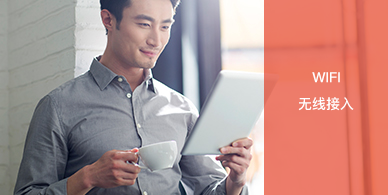
<style>
.page{position:relative;width:388px;height:195px}
.page>*{position:absolute;margin:0}
.t1{font:14px "PingFangSC-Medium";color:#fefefe}
</style>
<div class="page">
<p class="t1" style="left:312px;top:72px;width:28px;height:11px">WIFI</p>
<p class="t1" style="left:298px;top:97px;width:56px;height:14px">无线接入</p>
</div>
